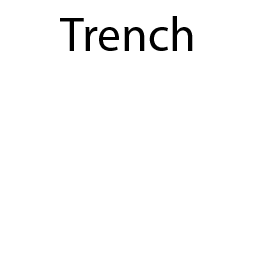
<style>
.page{position:relative;width:256px;height:256px;background:#ffffff}
.page>*{position:absolute;margin:0}
.t1{font:48px "MyriadPro-Regular";color:#000000}
</style>
<div class="page">
<p class="t1" style="left:60px;top:16px;width:133px;height:35px">Trench</p>
</div>
